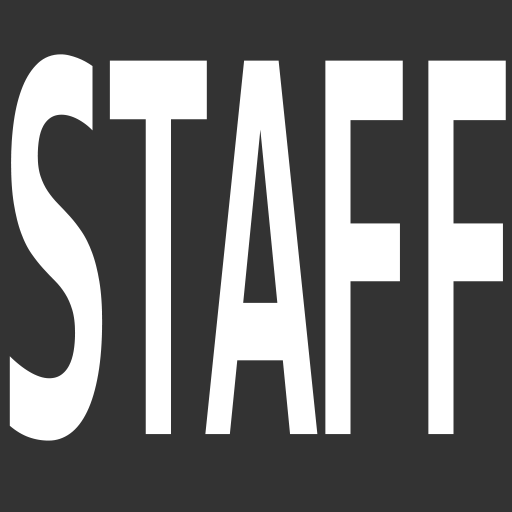
<style>
.page{position:relative;width:512px;height:512px;background:#333333}
.page>*{position:absolute;margin:0}
.t1{font:585.4px "Consolas-Bold";letter-spacing:-0.05em;color:#ffffff;scale:0.35 1}
</style>
<div class="page">
<p class="t1" style="left:9px;top:54px;width:497px;height:387px">STAFF</p>
</div>
